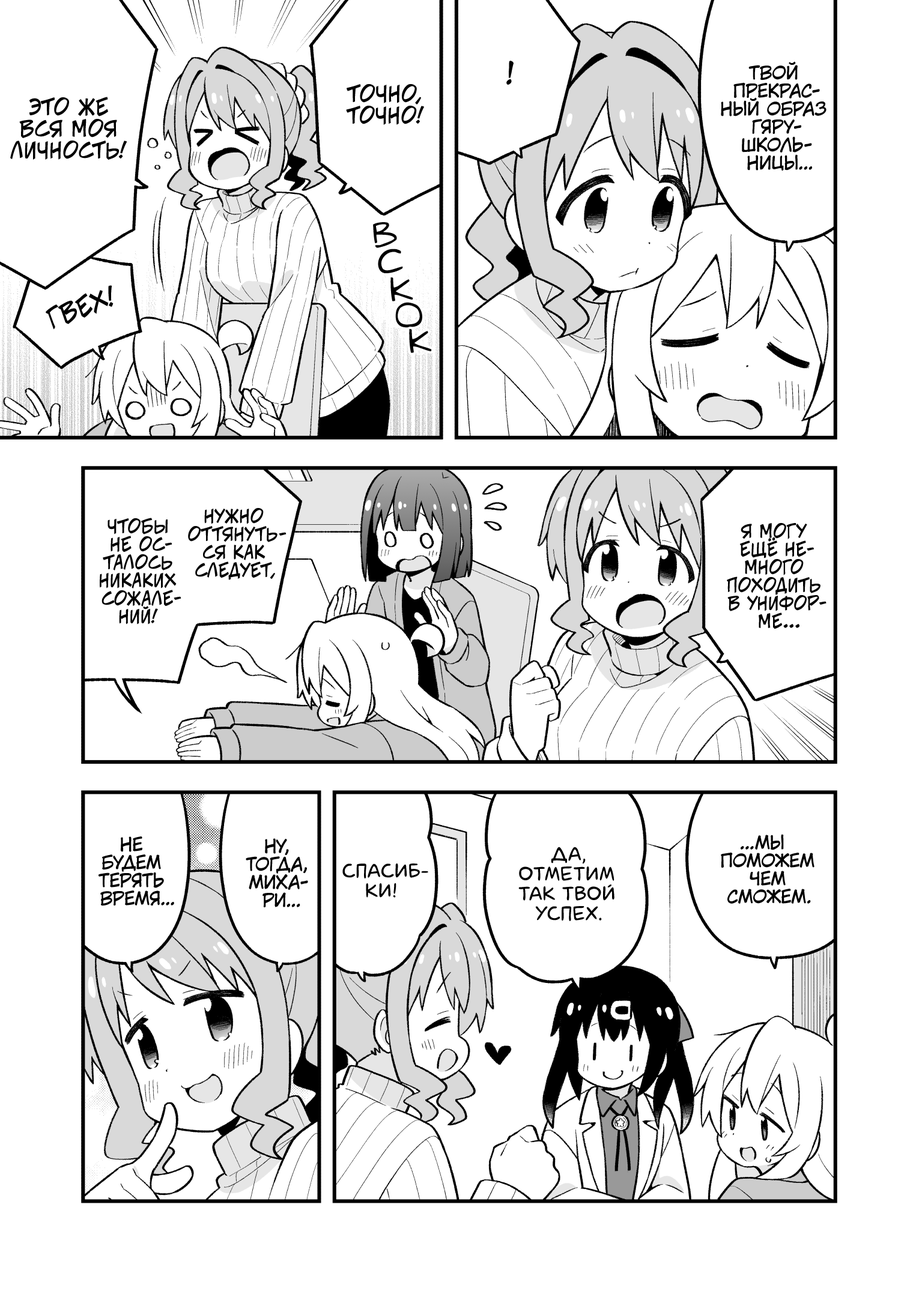
<style>
.page{position:relative;width:919px;height:1297px;background:#ffffff}
.page>*{position:absolute;margin:0}
.t1{font:28.8px "KuraiVoice2";color:#000000;text-transform:uppercase}
.t2{font:18px "KuraiVoice2";color:#000000;text-transform:uppercase}
.t3{font:21.6px "v_CCJeffCampbell";color:#000000;text-transform:uppercase}
.t4{font:32.4px "v_Augie";color:#000000;text-transform:uppercase}
.t5{font:25.2px "v_CCJeffCampbell";color:#000000;text-transform:uppercase}
.t6{font:18px "v_CCJeffCampbell";color:#000000;text-transform:uppercase}
.t7{font:19.8px "laCartoonerie";color:#000000;text-transform:uppercase}
</style>
<div class="page">
<p class="t1" style="left:506px;top:61px;width:8px;height:24px">!</p>
<p class="t2" style="left:721px;top:61px;width:106px;height:110px;text-align:center">Твой<br>прекрас-<br>ный образ<br>гяру-<br>школь-<br>ницы...</p>
<p class="t3" style="left:346px;top:84px;width:78px;height:41px;text-align:center">Точно,<br>точно!</p>
<p class="t3" style="left:10px;top:97px;width:117px;height:63px;text-align:center">Это же<br>вся моя<br>личность!</p>
<p class="t4" style="left:373px;top:222px;width:24px;height:26px;rotate:-5deg">в</p>
<p class="t4" style="left:378px;top:249px;width:25px;height:24px;rotate:-5deg">с</p>
<p class="t4" style="left:390px;top:278px;width:23px;height:24px;rotate:-5deg">к</p>
<p class="t5" style="left:46px;top:285px;width:68px;height:45px;rotate:-20deg">Гвех!</p>
<p class="t4" style="left:395px;top:302px;width:27px;height:26px;rotate:-5deg">о</p>
<p class="t4" style="left:409px;top:329px;width:23px;height:24px;rotate:-5deg">к</p>
<p class="t6" style="left:188px;top:508px;width:99px;height:72px;text-align:center">Нужно<br>оттянуть-<br>ся как<br>следует,</p>
<p class="t6" style="left:100px;top:518px;width:81px;height:107px;text-align:center">чтобы<br>не ос-<br>талось<br>никаких<br>сожале-<br>ний!</p>
<p class="t6" style="left:727px;top:523px;width:100px;height:107px;text-align:center">Я могу<br>ещё не-<br>много<br>походить<br>в унифор-<br>ме...</p>
<p class="t2" style="left:99px;top:837px;width:75px;height:69px;text-align:center">Не<br>будем<br>терять<br>время...</p>
<p class="t2" style="left:246px;top:839px;width:62px;height:69px;text-align:center">Ну,<br>тогда,<br>Миха-<br>ри...</p>
<p class="t2" style="left:721px;top:834px;width:94px;height:70px;text-align:center">...Мы<br>поможем<br>чем<br>сможем.</p>
<p class="t7" style="left:518px;top:847px;width:96px;height:74px;text-align:center">Да,<br>отметим<br>так твой<br>успех.</p>
<p class="t7" style="left:342px;top:864px;width:86px;height:34px;text-align:center">Спасиб-<br>ки!</p>
</div>
